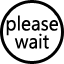
<style>
.page{position:relative;width:64px;height:64px;background:#ffffff}
.page>*{position:absolute;margin:0}
.t1{font:20px/18px "SegoeUISymbol";color:#000000;scale:0.95 1}
</style>
<div class="page">
<p class="t1" style="left:6px;top:15px;width:52px;height:34px;text-align:center">please<br>wait</p>
</div>
